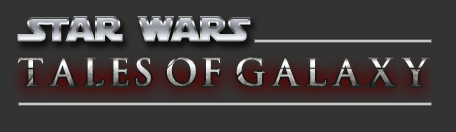
<style>
.page{position:relative;width:456px;height:132px;background:#333333}
.page>*{position:absolute;margin:0}
.t1{font:35px "StarJedi";letter-spacing:0.014em;font-weight:bold}
.t2{font:29px "EPISODE-I";letter-spacing:0.2em}
</style>
<div class="page">
<p class="t1" style="left:17px;top:16px;width:234px;height:26px">STar waRS</p>
<p class="t2" style="left:18px;top:57px;width:412px;height:29px">TALES OF GALAXY</p>
</div>
